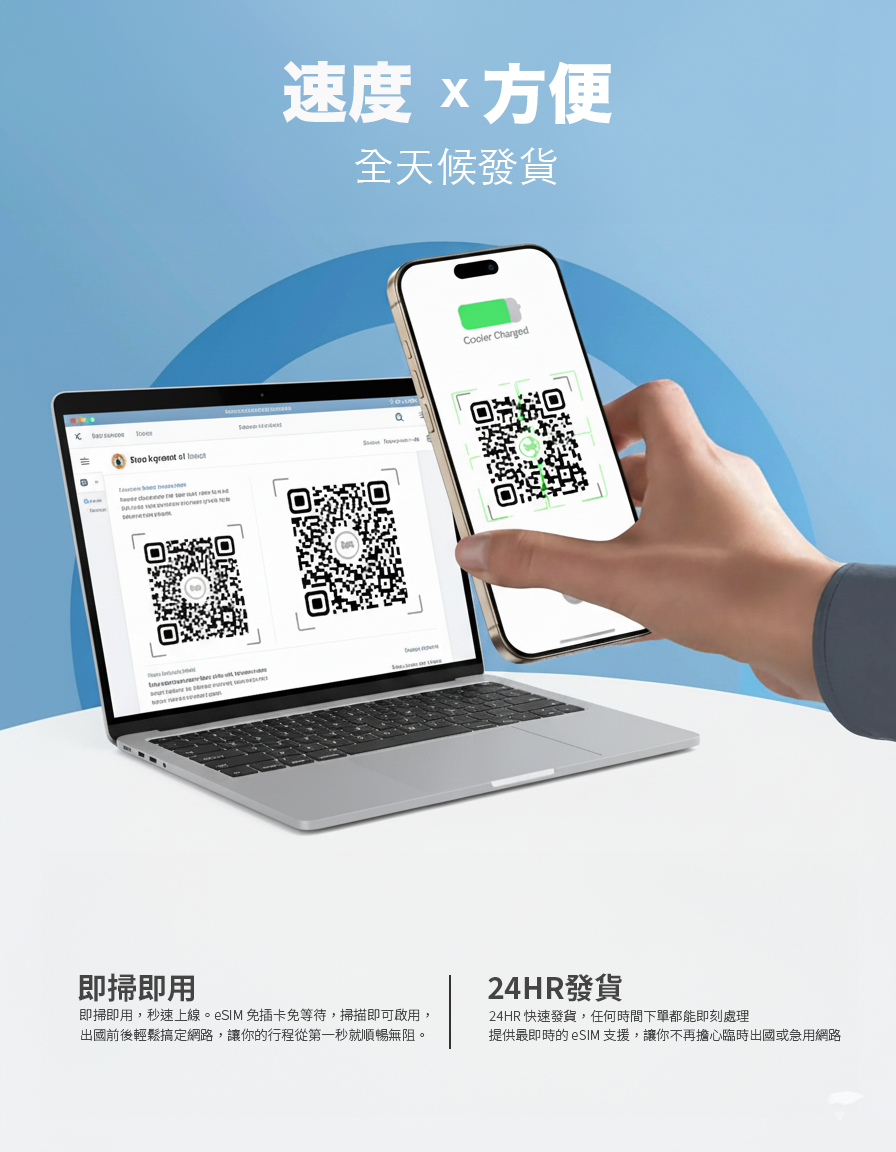
<style>
.page{position:relative;width:896px;height:1152px}
.page>*{position:absolute;margin:0}
.t1{font:65.4px "HiraKakuStdN-W8";color:#f9f9f9}
.t2{font:65.4px "HiraKakuStdN-W8";color:#ffffff}
.t3{font:32.6px "HiraKakuStdN-W8";color:#ffffff}
.t4{font:41.2px "STHeitiTC-Light";color:#ffffff}
.t5{font:29.8px "SourceHanSansTC-Bold";color:#444444}
.t6{font:29.5px "SourceHanSansTC-Bold";color:#444444}
.t7{font:13.4px "SourceHanSansTC-Light";color:#444444}
.t8{font:13.3px "SourceHanSansTC-Light";color:#444444}
</style>
<div class="page">
<p class="t1" style="left:282px;top:61px;width:130px;height:62px">速度</p>
<p class="t2" style="left:483px;top:61px;width:129px;height:64px">方便</p>
<p class="t3" style="left:440px;top:79px;width:30px;height:28px">X</p>
<p class="t4" style="left:354px;top:147px;width:203px;height:38px">全天候發貨</p>
<p class="t5" style="left:78px;top:973px;width:116px;height:29px">即掃即用</p>
<p class="t6" style="left:488px;top:973px;width:134px;height:29px">24HR發貨</p>
<p class="t7" style="left:80px;top:1008px;width:349px;height:14px">即掃即用，秒速上線。eSIM 免插卡免等待，掃描即可啟用，</p>
<p class="t8" style="left:489px;top:1009px;width:260px;height:14px">24HR 快速發貨，任何時間下單都能即刻處理</p>
<p class="t7" style="left:81px;top:1028px;width:344px;height:14px">出國前後輕鬆搞定網路，讓你的行程從第一秒就順暢無阻。</p>
<p class="t8" style="left:489px;top:1028px;width:352px;height:14px">提供最即時的 eSIM 支援，讓你不再擔心臨時出國或急用網路</p>
</div>
